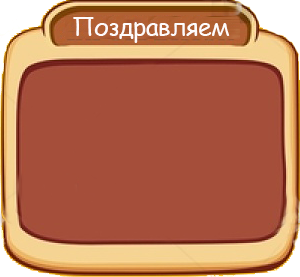
<style>
.page{position:relative;width:300px;height:277px;background:#a54e3a}
.page>*{position:absolute;margin:0}
.t1{font:25px "ComicSansMS";letter-spacing:-0.02em;color:#fefbfb}
</style>
<div class="page">
<p class="t1" style="left:73px;top:17px;width:157px;height:26px">Поздравляем</p>
</div>
